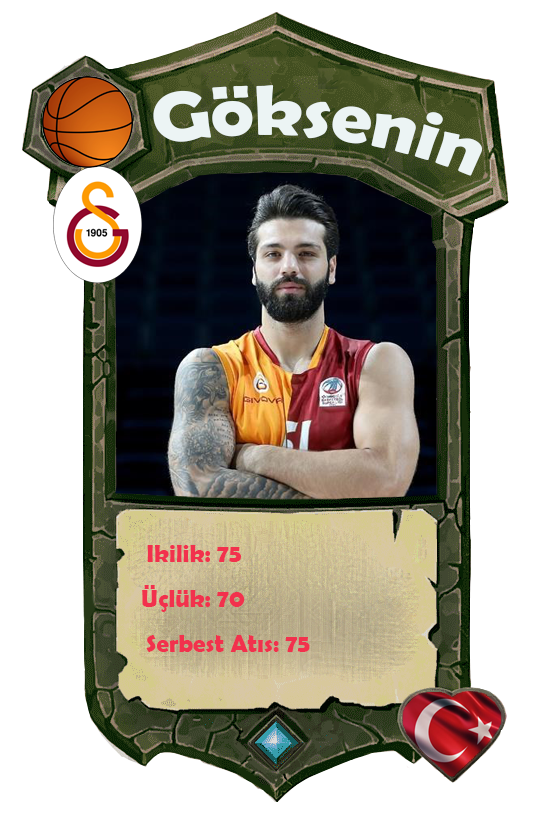
<style>
.page{position:relative;width:558px;height:814px;background:#ffffff}
.page>*{position:absolute;margin:0}
.t1{font:70.9px "BerlinSansFBDemi-Bold";color:#ecf4f4;scale:1.06 1}
.t2{font:25px "BerlinSansFBDemi-Bold";color:#f2314d}
</style>
<div class="page">
<p class="t1" style="left:153px;top:85px;width:329px;height:91px;rotate:6deg">Göksenin</p>
<p class="t2" style="left:147px;top:545px;width:94px;height:17px">Ikilik: 75</p>
<p class="t2" style="left:142px;top:585px;width:103px;height:27px">Üçlük: 70</p>
<p class="t2" style="left:146px;top:635px;width:164px;height:17px">Serbest Atıs: 75</p>
</div>
